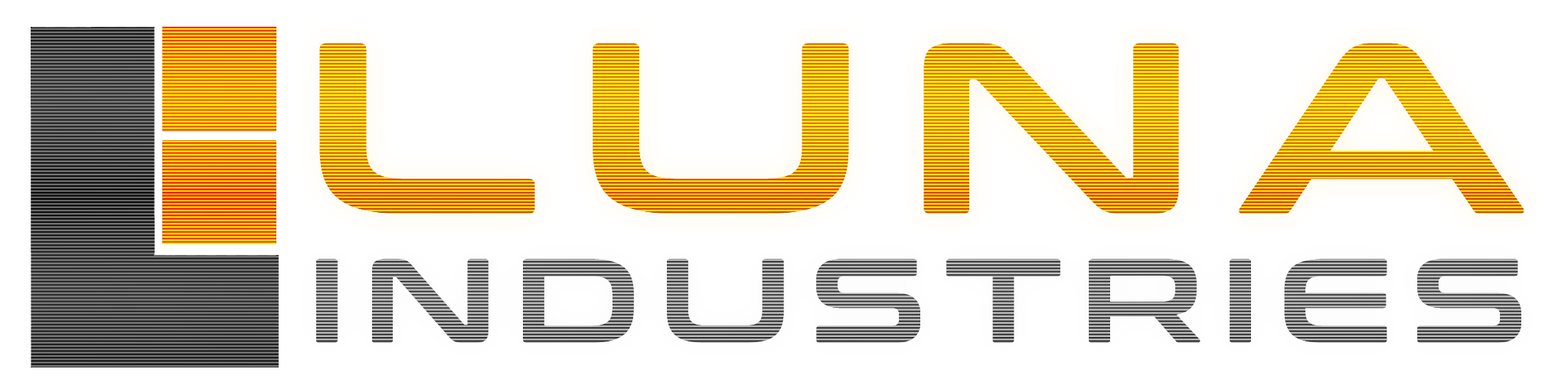
<style>
.page{position:relative;width:1568px;height:392px;background:#ffffff}
.page>*{position:absolute;margin:0}
.t1{font:242.9px "ConthraxSb-Regular";letter-spacing:0.12em;scale:1.24 1}
.t2{font:118.9px "ConthraxSb-Regular";letter-spacing:0.12em;scale:1.16 1}
</style>
<div class="page">
<p class="t1" style="left:319px;top:43px;width:1205px;height:171px">LUNA</p>
<p class="t2" style="left:316px;top:259px;width:1205px;height:84px">INDUSTRIES</p>
</div>
